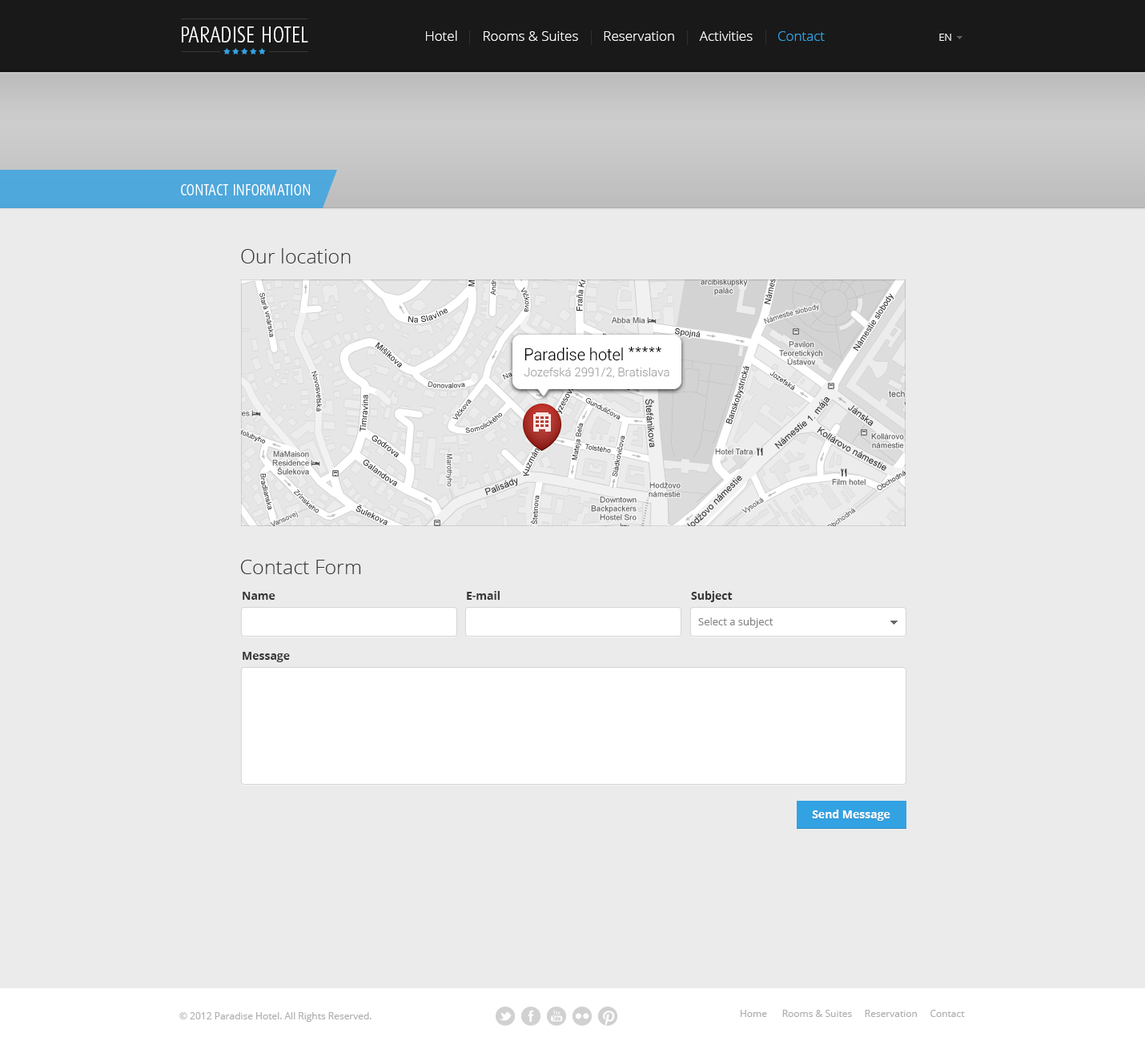
<style>
.page{position:relative;width:1145px;height:1041px;background:#ebebeb}
.page>*{position:absolute;margin:0}
.t1{font:22.4px "DaxCondensed-Light";color:#ffffff;text-transform:uppercase}
.t2{font:13.6px "OpenSans-Light";color:#ffffff}
.t3{font:13.6px "OpenSans-Light";color:#32a2e3}
.t4{font:10.4px "OpenSans-Light";color:#ffffff}
.t5{font:16px "DaxCondensed-Light";color:#ffffff;text-transform:uppercase}
.t6{font:20px "OpenSans-Light";color:#373535}
.t7{font:16px "Roboto-Light";color:#000000}
.t8{font:12px "Roboto-Light";color:#a3a3a3}
.t9{font:11.2px "OpenSans-Bold";color:#373535}
.t10{font:10.4px "OpenSans";color:#868585}
.t11{font:11.2px "OpenSans-Bold";color:#ffffff}
.t12{font:9.6px "OpenSans";color:#aeadad}
</style>
<div class="page">
<p class="t1" style="left:182px;top:26px;width:126px;height:16px">Paradise hotel</p>
<p class="t2" style="left:426px;top:30px;width:399px;height:11px">Hotel       Rooms &amp; Suites       Reservation       Activities       <span class="t3">Contact</span></p>
<p class="t4" style="left:939px;top:34px;width:12px;height:7px">EN</p>
<p class="t5" style="left:181px;top:184px;width:129px;height:11px">contact information</p>
<p class="t6" style="left:241px;top:248px;width:110px;height:15px">Our location</p>
<p class="t7" style="left:525px;top:347px;width:137px;height:13px">Paradise hotel *****</p>
<p class="t8" style="left:524px;top:368px;width:146px;height:10px">Jozefská 2991/2, Bratislava</p>
<p class="t6" style="left:241px;top:560px;width:120px;height:14px">Contact Form</p>
<p class="t9" style="left:243px;top:592px;width:33px;height:8px">Name</p>
<p class="t9" style="left:467px;top:591px;width:33px;height:9px">E-mail</p>
<p class="t9" style="left:691px;top:591px;width:42px;height:11px">Subject</p>
<p class="t10" style="left:698px;top:617px;width:76px;height:11px">Select a subject</p>
<p class="t9" style="left:243px;top:652px;width:47px;height:10px">Message</p>
<p class="t11" style="left:812px;top:810px;width:79px;height:11px">Send Message</p>
<p class="t12" style="left:179px;top:1012px;width:193px;height:10px">© 2012 Paradise Hotel. All Rights Reserved.</p>
<p class="t12" style="left:741px;top:1010px;width:224px;height:7px">Home      Rooms &amp; Suites     Reservation     Contact</p>
</div>
